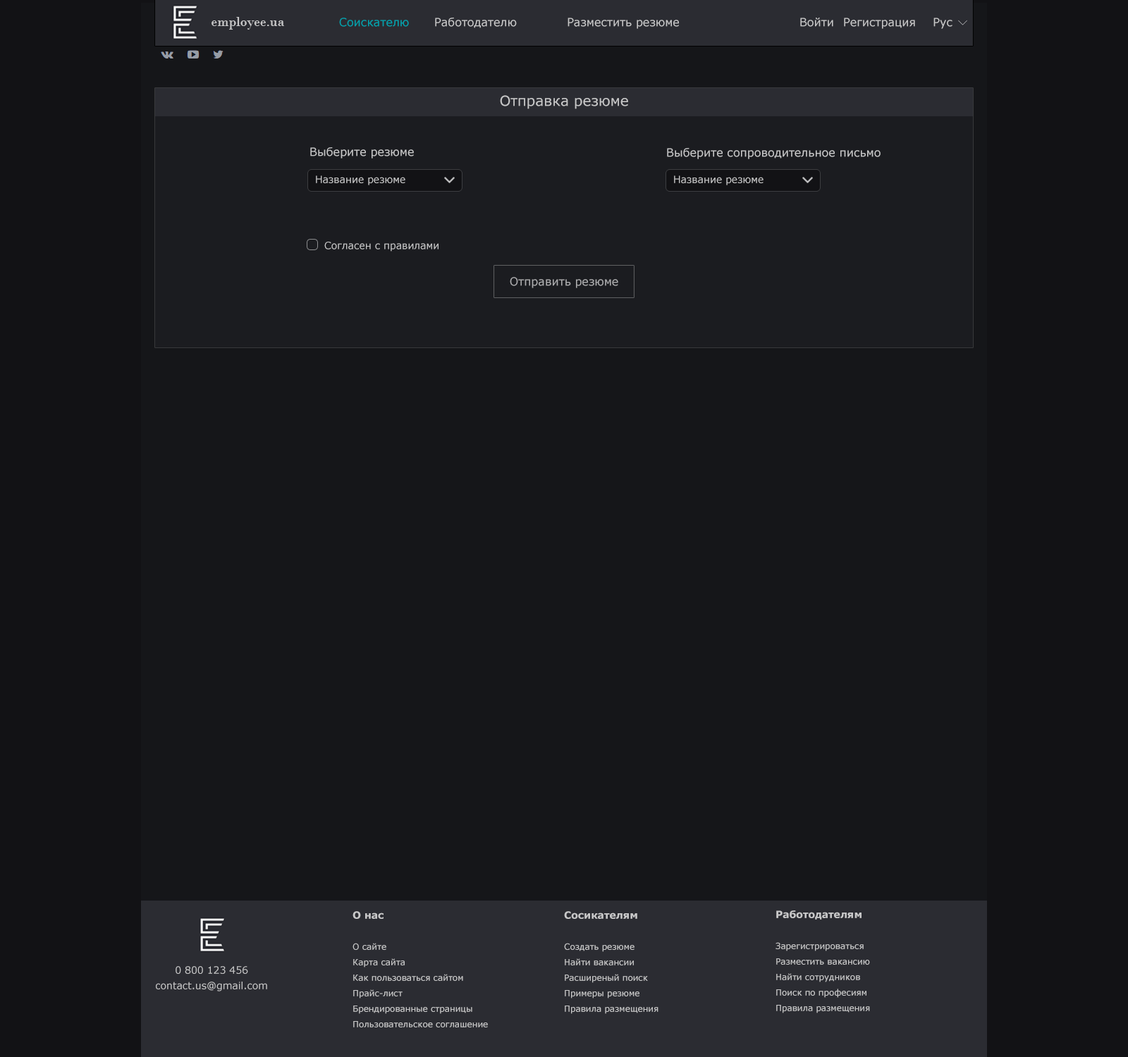
<style>
.page{position:relative;width:1128px;height:1057px;background:#151619}
.page>*{position:absolute;margin:0}
.t1{font:14.1px "BodoniMT";color:#c8c8c9}
.t2{font:11.3px "Verdana";color:#00a4af}
.t3{font:11.3px "Verdana";color:#c8c8c9}
.t4{font:14.1px "Verdana";color:#c8c8c9}
.t5{font:9.9px "Verdana";color:#c8c8c9}
.t6{font:11.3px "Verdana";color:#adadaf}
.t7{font:8.5px/15.5px "Verdana";color:#c8c8c9}
.t8{font:9.9px/15.5px "Verdana-Bold";color:#c8c8c9}
.t9{font:9.9px/15.5px "Verdana";color:#c8c8c9}
</style>
<div class="page">
<p class="t1" style="left:211px;top:17px;width:73px;height:13px">employee.ua</p>
<p class="t2" style="left:339px;top:18px;width:70px;height:9px">Соискателю</p>
<p class="t3" style="left:435px;top:18px;width:82px;height:10px">Работодателю</p>
<p class="t3" style="left:567px;top:18px;width:112px;height:11px">Разместить резюме</p>
<p class="t3" style="left:800px;top:18px;width:33px;height:9px">Войти</p>
<p class="t3" style="left:844px;top:18px;width:71px;height:11px">Регистрация</p>
<p class="t3" style="left:933px;top:18px;width:19px;height:11px">Рус</p>
<p class="t4" style="left:500px;top:95px;width:128px;height:14px">Отправка резюме</p>
<p class="t3" style="left:310px;top:147px;width:104px;height:12px">Выберите резюме</p>
<p class="t3" style="left:667px;top:148px;width:213px;height:11px">Выберите сопроводительное письмо</p>
<p class="t5" style="left:316px;top:176px;width:89px;height:9px">Название резюме</p>
<p class="t5" style="left:674px;top:176px;width:89px;height:9px">Название резюме</p>
<p class="t5" style="left:324px;top:242px;width:114px;height:10px">Согласен с правилами</p>
<p class="t6" style="left:510px;top:277px;width:108px;height:11px">Отправить резюме</p>
<p class="t7" style="left:352px;top:911px;width:136px;height:117px;text-align:right"><span class="t8">О нас<br><br></span>О сайте<br>Карта сайта<br>Как пользоваться сайтом<br>Прайс-лист<br>Брендированные страницы<br>Пользовательское соглашение</p>
<p class="t7" style="left:564px;top:911px;width:94px;height:103px;text-align:right"><span class="t8">Сосикателям<br><br></span>Создать резюме<br>Найти вакансии<br>Расширеный поиск<br>Примеры резюме<br>Правила размещения</p>
<p class="t7" style="left:775px;top:911px;width:95px;height:103px;text-align:right"><span class="t8">Работодателям<br><br></span>Зарегистрироваться<br>Разместить вакансию<br>Найти сотрудников<br>Поиск по професиям<br>Правила размещения</p>
<p class="t9" style="left:156px;top:966px;width:111px;height:26px;text-align:center">0 800 123 456<br>contact.us@gmail.com</p>
</div>
